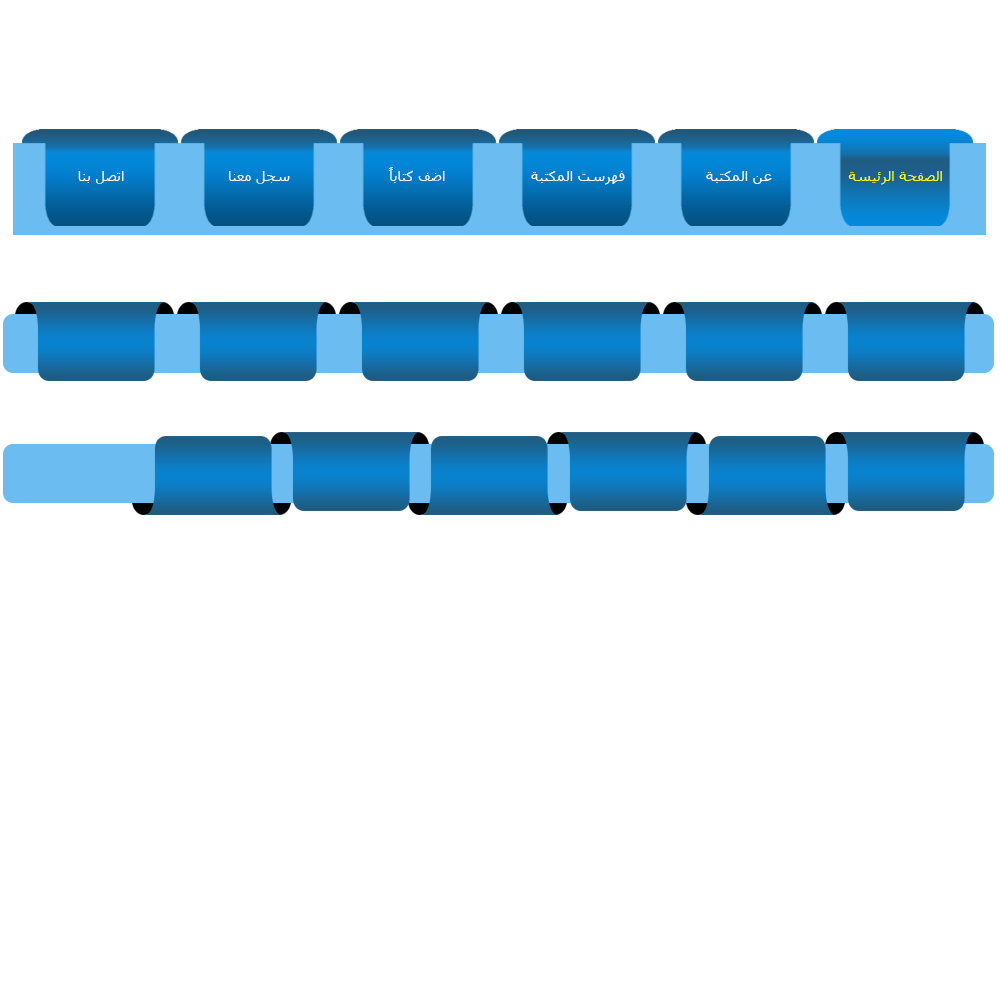
<style>
.page{position:relative;width:1000px;height:1000px;background:#ffffff}
.page>*{position:absolute;margin:0}
.t1{font:14px "Tahoma";color:#ffffff}
.t2{font:14px "Tahoma";color:#ffff00}
</style>
<div class="page">
<p class="t1" style="left:78px;top:167px;width:864px;height:18px"><span class="t2">الصفحة الرئيسة</span>                 عن المكتبة                  فهرست المكتبة                   اضف كتاباً                      سجل معنا                       اتصل بنا</p>
</div>
